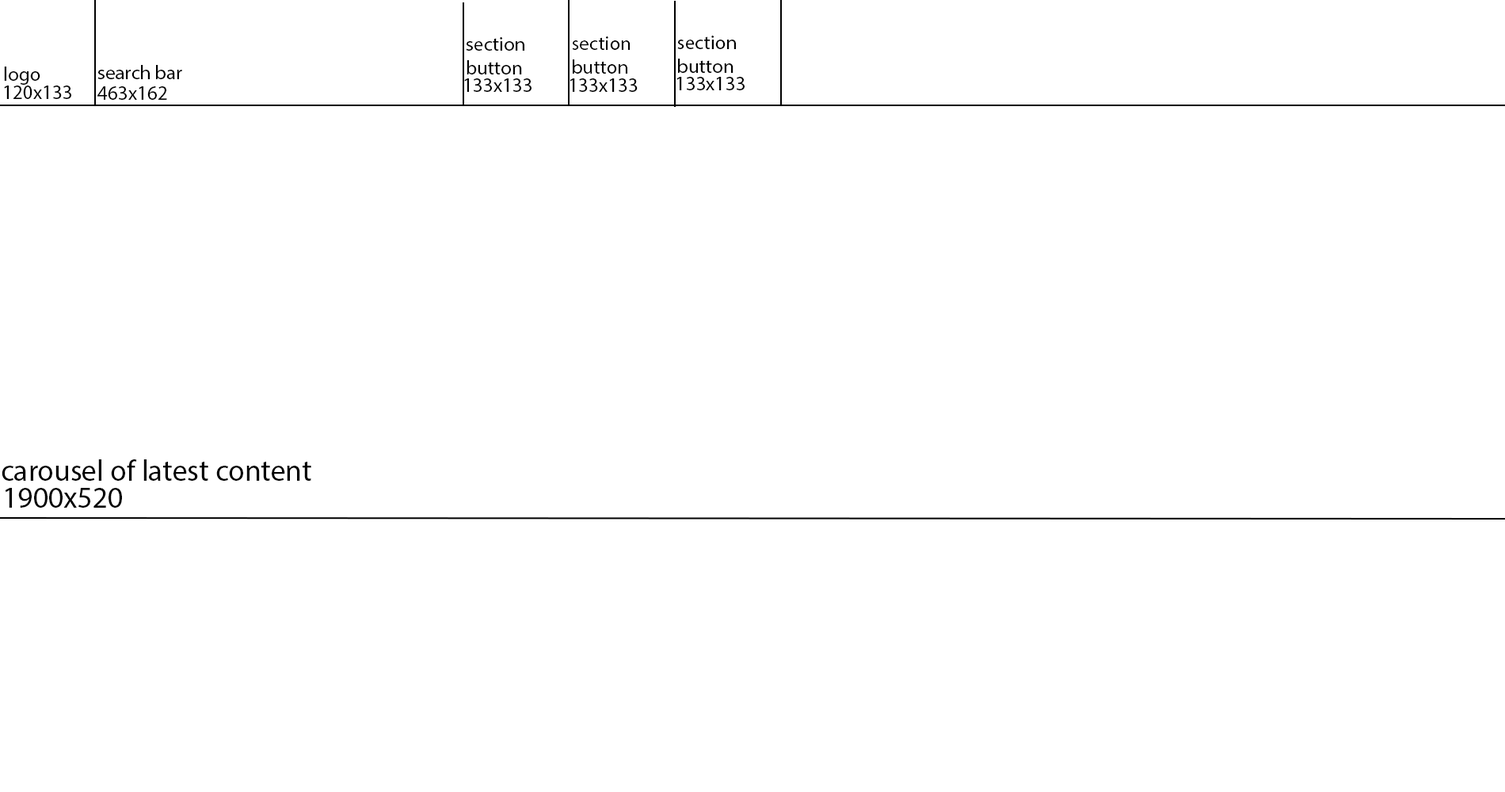
<style>
.page{position:relative;width:1505px;height:792px;background:#ffffff}
.page>*{position:absolute;margin:0}
.t1{font:19.8px "MyriadPro-Regular";color:#000000}
.t2{font:29.7px "MyriadPro-Regular";color:#000000}
</style>
<div class="page">
<p class="t1" style="left:466px;top:37px;width:58px;height:37px">section <br>button</p>
<p class="t1" style="left:677px;top:36px;width:59px;height:37px">section<br>button</p>
<p class="t1" style="left:97px;top:65px;width:85px;height:14px">search bar</p>
<p class="t1" style="left:4px;top:67px;width:36px;height:18px">logo</p>
<p class="t1" style="left:677px;top:77px;width:68px;height:13px">133x133</p>
<p class="t1" style="left:4px;top:86px;width:67px;height:13px">120x133</p>
<p class="t1" style="left:97px;top:86px;width:70px;height:14px">463x162</p>
<p class="t1" style="left:464px;top:78px;width:68px;height:14px">133x133</p>
<p class="t1" style="left:570px;top:78px;width:68px;height:14px">133x133</p>
<p class="t2" style="left:2px;top:459px;width:309px;height:22px">carousel of latest content</p>
<p class="t2" style="left:5px;top:488px;width:117px;height:20px">1900x520</p>
</div>
